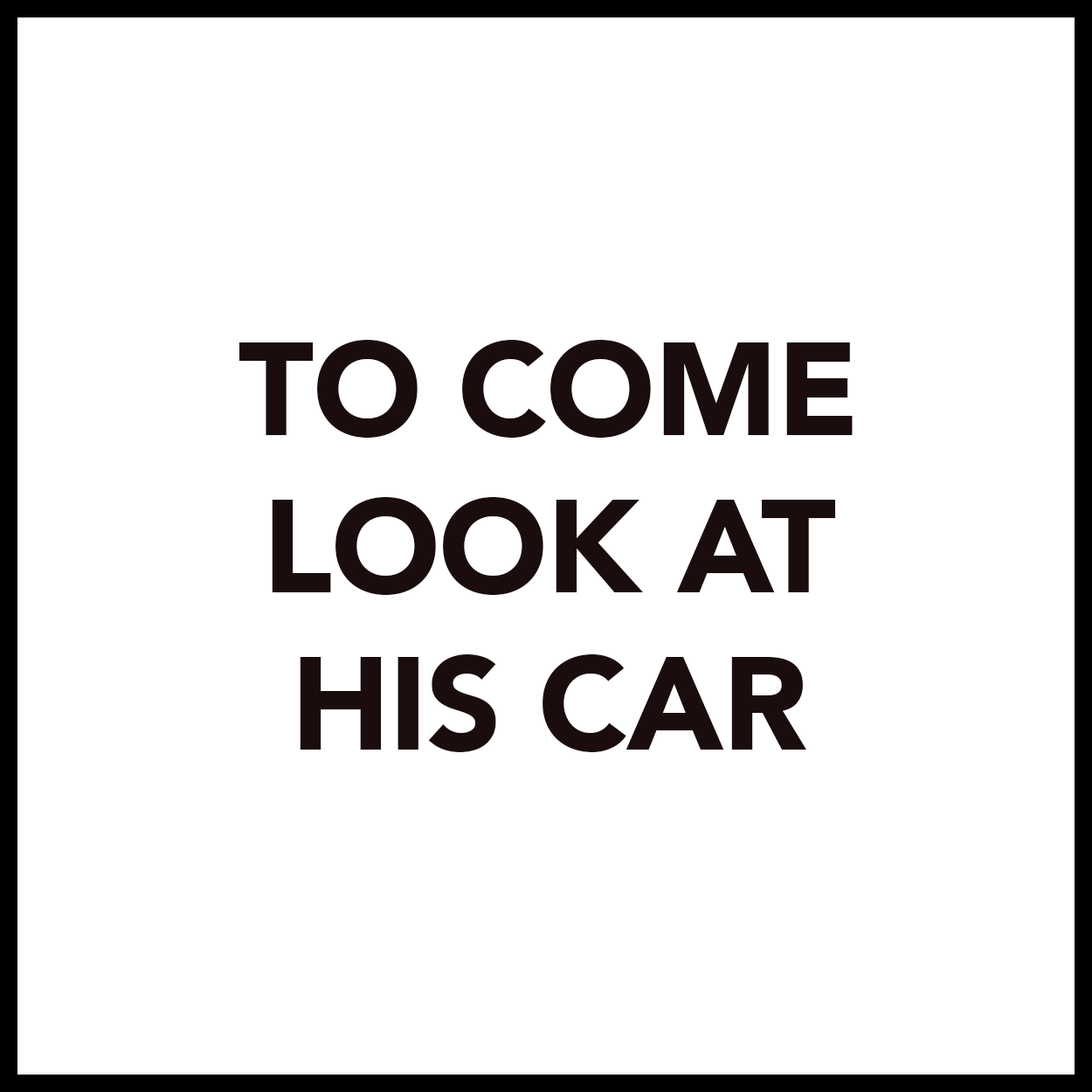
<style>
.page{position:relative;width:1092px;height:1092px;background:#ffffff}
.page>*{position:absolute;margin:0}
.t1{font:131px "Avenir-Black";letter-spacing:-0.01em;color:#1b0d0d}
</style>
<div class="page">
<p class="t1" style="left:239px;top:340px;width:614px;height:412px;text-align:center">TO COME<br>LOOK AT<br>HIS CAR</p>
</div>
